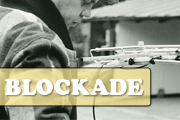
<style>
.page{position:relative;width:180px;height:120px}
.page>*{position:absolute;margin:0}
.t1{font:22px "CooperBlackStd";color:#ffffff}
</style>
<div class="page">
<p class="t1" style="left:5px;top:78px;width:138px;height:18px">BLOCKADE</p>
</div>
